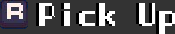
<style>
.page{position:relative;width:175px;height:34px;background:#333333}
.page>*{position:absolute;margin:0}
.t1{font:30px "ManaspaceReg";color:#ffffff}
</style>
<div class="page">
<p class="t1" style="left:39px;top:3px;width:136px;height:31px">Pick Up</p>
</div>
